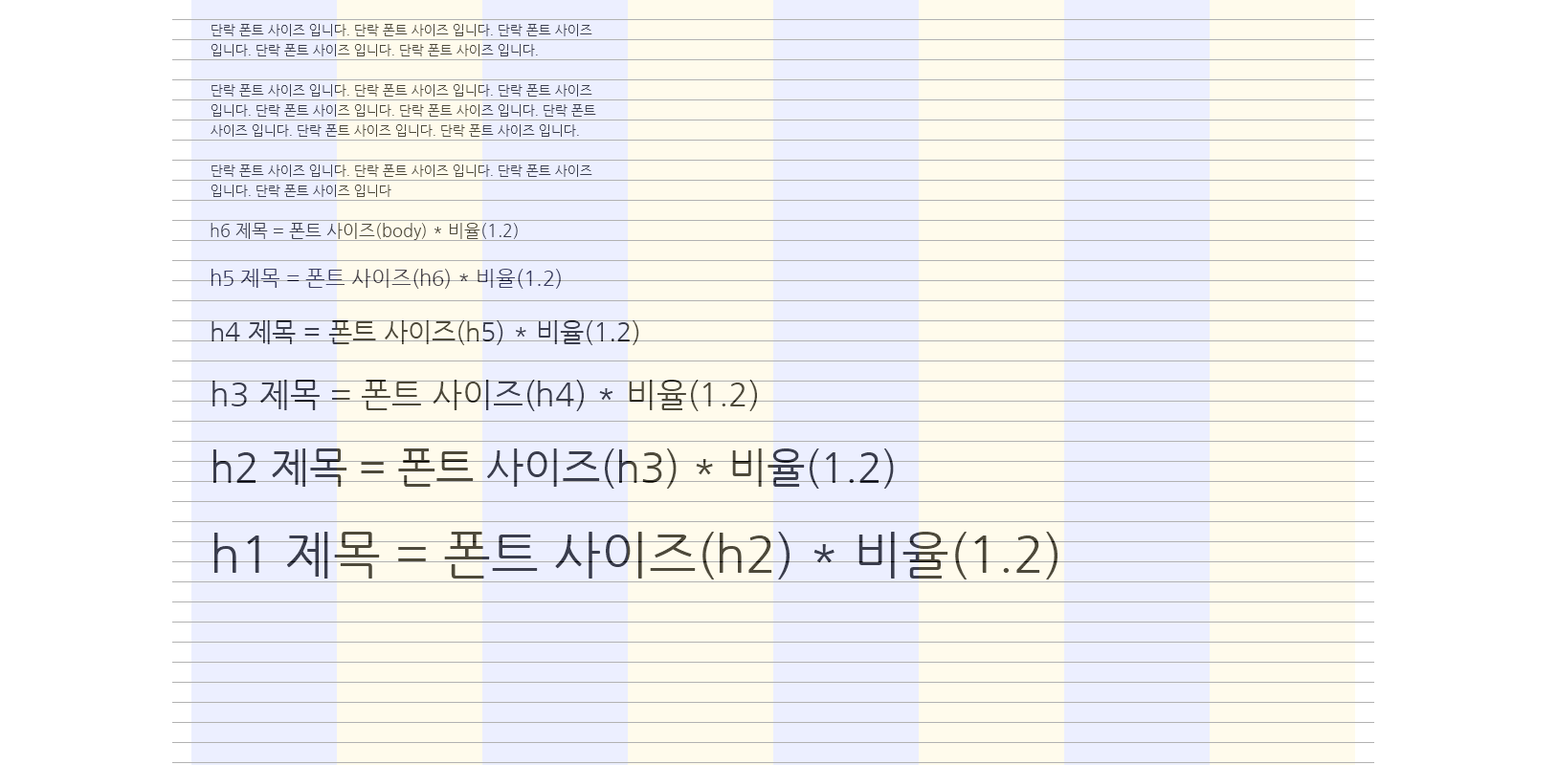
<style>
.page{position:relative;width:1558px;height:765px;background:#ffffff}
.page>*{position:absolute;margin:0}
.t1{font:13.4px "NanumGothic";color:#3a3d4d}
.t2{font:16.7px "NanumGothic";color:#3a3d4d}
.t3{font:20.9px "NanumGothic";color:#3a3d4d}
.t4{font:26.2px "NanumGothic";color:#3a3d4d}
.t5{font:32.7px "NanumGothic";color:#3a3d4d}
.t6{font:40.9px "NanumGothic";color:#3a3d4d}
.t7{font:51.1px "NanumGothic";color:#3a3d4d}
</style>
<div class="page">
<p class="t1" style="left:211px;top:24px;width:385px;height:173px">단락 폰트 사이즈 입니다. 단락 폰트 사이즈 입니다. 단락 폰트 사이즈 입니다. 단락 폰트 사이즈 입니다. 단락 폰트 사이즈 입니다.<br>단락 폰트 사이즈 입니다. 단락 폰트 사이즈 입니다. 단락 폰트 사이즈 입니다. 단락 폰트 사이즈 입니다. 단락 폰트 사이즈 입니다. 단락 폰트 사이즈 입니다. 단락 폰트 사이즈 입니다. 단락 폰트 사이즈 입니다.<br>단락 폰트 사이즈 입니다. 단락 폰트 사이즈 입니다. 단락 폰트 사이즈 입니다. 단락 폰트 사이즈 입니다</p>
<p class="t2" style="left:211px;top:223px;width:846px;height:357px">h6 제목 = 폰트 사이즈(body) * 비율(1.2)<br><span class="t3">h5 제목 = 폰트 사이즈(h6) * 비율(1.2)<br></span><span class="t4">h4 제목 = 폰트 사이즈(h5) * 비율(1.2)<br></span><span class="t5">h3 제목 = 폰트 사이즈(h4) * 비율(1.2)<br></span><span class="t6">h2 제목 = 폰트 사이즈(h3) * 비율(1.2)<br></span><span class="t7">h1 제목 = 폰트 사이즈(h2) * 비율(1.2)</span></p>
</div>
